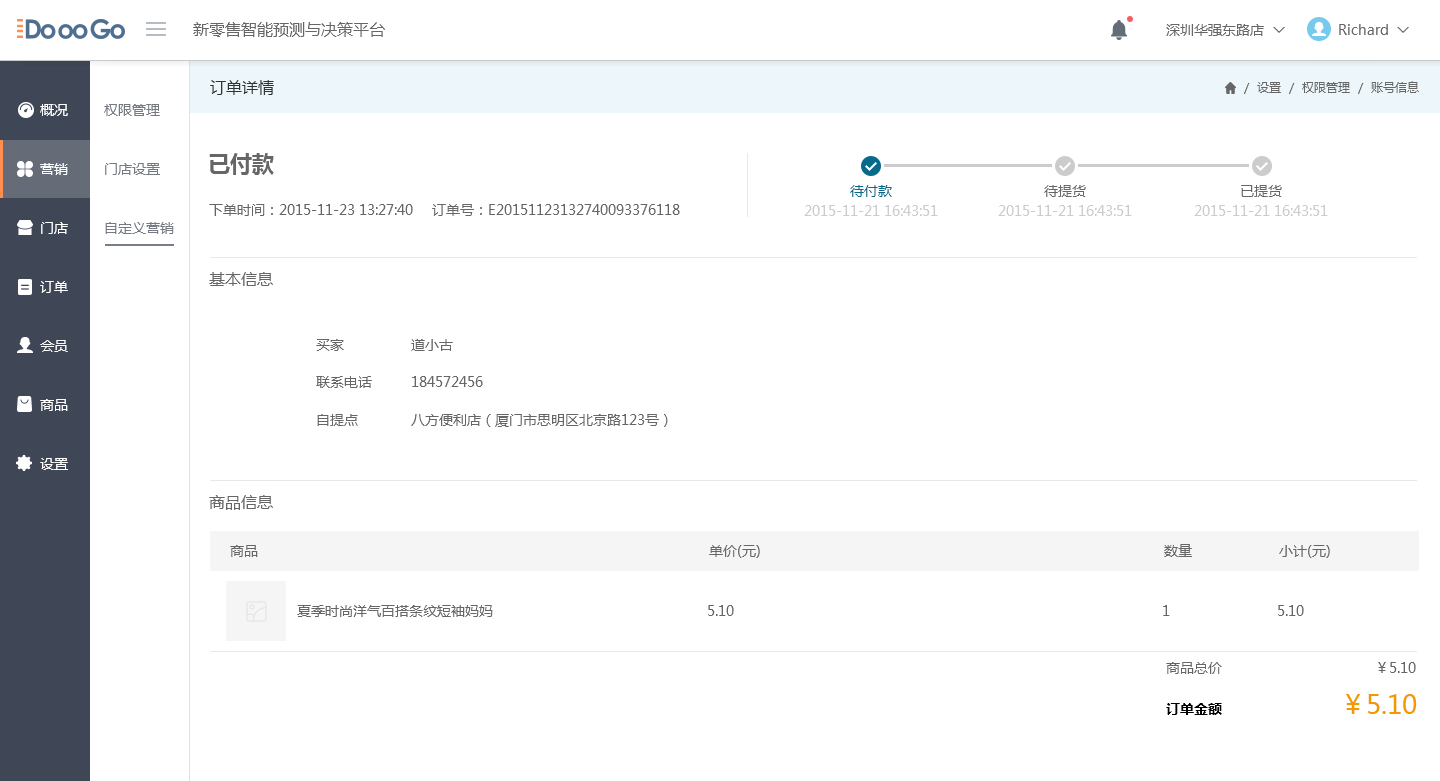
<style>
.page{position:relative;width:1440px;height:781px;background:#ffffff}
.page>*{position:absolute;margin:0}
.t1{font:16px "MicrosoftYaHeiUI";color:#666666}
.t2{font:14px "MicrosoftYaHeiUI";color:#666666}
.t3{font:14px "Marlett";color:#666666}
.t4{font:16px "MicrosoftYaHeiUI";color:#333333}
.t5{font:12px "MicrosoftYaHeiUI";color:#666666}
.t6{font:14px/59px "MicrosoftYaHeiUI";color:#ffffff}
.t7{font:14px/59px "MicrosoftYaHeiUI";color:#747982}
.t8{font:22px "MicrosoftYaHeiUI-Bold";color:#666666}
.t9{font:14px/20px "MicrosoftYaHeiUI";color:#cccccc}
.t10{font:14px/20px "MicrosoftYaHeiUI";color:#086a8b}
.t11{font:14px/20px "MicrosoftYaHeiUI";color:#666666}
.t12{font:26px "MicrosoftYaHeiUI";color:#f39800}
.t13{font:14px "MicrosoftYaHeiUI-Bold";color:#000000}
</style>
<div class="page">
<p class="t1" style="left:193px;top:22px;width:192px;height:15px">新零售智能预测与决策平台</p>
<p class="t2" style="left:1166px;top:24px;width:98px;height:12px">深圳华强东路店</p>
<p class="t2" style="left:1339px;top:24px;width:65px;height:11px">Richard <span class="t3">6</span></p>
<p class="t4" style="left:210px;top:80px;width:64px;height:15px">订单详情</p>
<p class="t5" style="left:1244px;top:81px;width:175px;height:13px">/  设置  /  权限管理  /  账号信息</p>
<p class="t6" style="left:40px;top:104px;width:28px;height:366px">概况<br>营销<br>门店<br>订单<br>会员<br>商品<br>设置</p>
<p class="t7" style="left:104px;top:104px;width:70px;height:130px">权限管理<br>门店设置<br>自定义营销</p>
<p class="t8" style="left:209px;top:153px;width:65px;height:22px">已付款</p>
<p class="t9" style="left:804px;top:185px;width:134px;height:31px;text-align:center"><span class="t10">待付款<br></span>2015-11-21 16:43:51</p>
<p class="t9" style="left:998px;top:185px;width:134px;height:31px;text-align:center"><span class="t11">待提货<br></span>2015-11-21 16:43:51</p>
<p class="t9" style="left:1194px;top:185px;width:134px;height:31px;text-align:center"><span class="t11">已提货<br></span>2015-11-21 16:43:51</p>
<p class="t2" style="left:209px;top:204px;width:204px;height:12px">下单时间：2015-11-23 13:27:40</p>
<p class="t2" style="left:432px;top:204px;width:248px;height:12px">订单号：E20151123132740093376118</p>
<p class="t1" style="left:209px;top:272px;width:64px;height:14px">基本信息</p>
<p class="t2" style="left:316px;top:339px;width:28px;height:12px">买家</p>
<p class="t2" style="left:411px;top:339px;width:42px;height:12px">道小古</p>
<p class="t2" style="left:316px;top:376px;width:56px;height:12px">联系电话</p>
<p class="t2" style="left:412px;top:376px;width:71px;height:11px">184572456</p>
<p class="t2" style="left:317px;top:414px;width:41px;height:12px">自提点</p>
<p class="t2" style="left:411px;top:414px;width:257px;height:13px">八方便利店（厦门市思明区北京路123号）</p>
<p class="t1" style="left:209px;top:495px;width:64px;height:15px">商品信息</p>
<p class="t2" style="left:230px;top:545px;width:28px;height:12px">商品</p>
<p class="t2" style="left:709px;top:545px;width:51px;height:13px">单价(元)</p>
<p class="t2" style="left:1164px;top:544px;width:28px;height:13px">数量</p>
<p class="t2" style="left:1279px;top:545px;width:51px;height:13px">小计(元)</p>
<p class="t2" style="left:297px;top:605px;width:196px;height:12px">夏季时尚洋气百搭条纹短袖妈妈</p>
<p class="t2" style="left:708px;top:605px;width:26px;height:11px">5.10</p>
<p class="t2" style="left:1163px;top:605px;width:7px;height:11px">1</p>
<p class="t2" style="left:1278px;top:605px;width:26px;height:11px">5.10</p>
<p class="t2" style="left:1166px;top:662px;width:56px;height:12px">商品总价</p>
<p class="t2" style="left:1378px;top:662px;width:38px;height:11px">￥5.10</p>
<p class="t12" style="left:1346px;top:694px;width:71px;height:20px">￥5.10</p>
<p class="t13" style="left:1166px;top:703px;width:56px;height:12px">订单金额</p>
</div>
